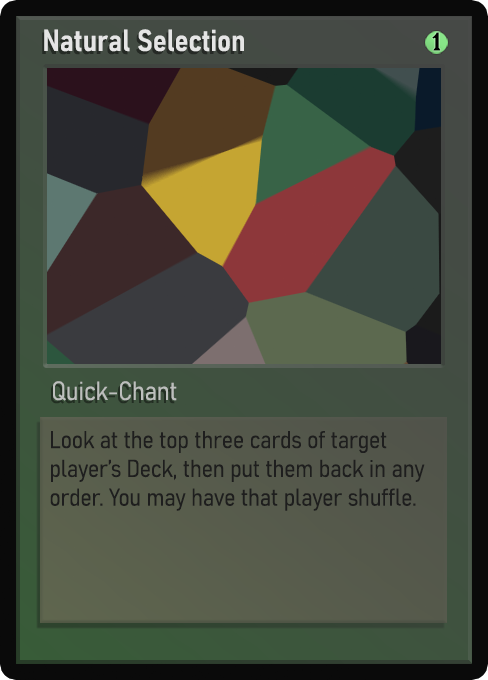
<style>
.page{position:relative;width:488px;height:680px}
.page>*{position:absolute;margin:0}
.t1{font:30px "Bahnschrift-SemiBoldSemiCondensed";color:#f2f2f2;font-weight:bold}
.t2{font:25px "WTRRoycroft";color:#000000;font-weight:bold;scale:1.09 1}
.t3{font:26px "Bahnschrift-LightSemiCondensed";color:#c8c8c8;font-weight:bold}
.t4{font:24px "Bahnschrift-LightSemiCondensed";color:#1e1e1e;font-weight:bold}
</style>
<div class="page">
<p class="t1" style="left:44px;top:29px;width:200px;height:23px;opacity:0.9">Natural Selection</p>
<p class="t2" style="left:432px;top:32px;width:9px;height:19px">1</p>
<p class="t3" style="left:53px;top:381px;width:124px;height:20px;opacity:0.9">Quick-Chant</p>
<p class="t4" style="left:50px;top:431px;width:375px;height:80px">Look at the top three cards of target player’s Deck, then put them back in any order. You may have that player shuffle.</p>
</div>
